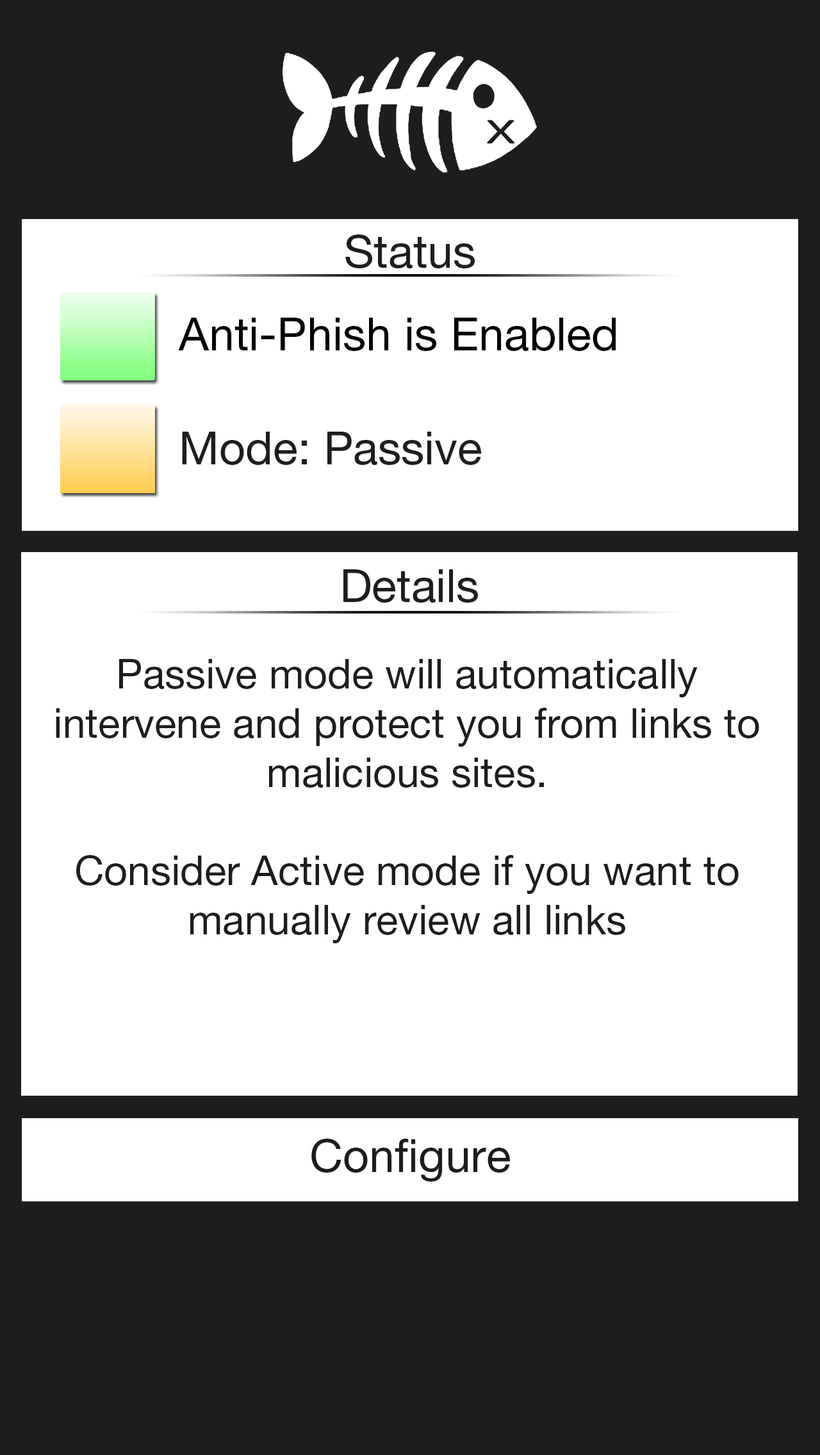
<style>
.page{position:relative;width:820px;height:1455px;background:#ffffff}
.page>*{position:absolute;margin:0}
.t1{font:46.1px "HelveticaNeueLTPro-Roman";color:#1d1d1d}
.t2{font:46.1px "HelveticaNeueLTPro-Roman";color:#000300}
.t3{font:41px "HelveticaNeueLTPro-Roman";color:#1d1d1d}
.t4{font:46.1px "HelveticaNeueLTPro-Roman";color:#1c1c1c}
</style>
<div class="page">
<p class="t1" style="left:345px;top:234px;width:129px;height:34px">Status</p>
<p class="t2" style="left:178px;top:318px;width:437px;height:33px">Anti-Phish is Enabled</p>
<p class="t1" style="left:182px;top:432px;width:299px;height:33px">Mode: Passive</p>
<p class="t1" style="left:343px;top:569px;width:135px;height:34px">Details</p>
<p class="t3" style="left:56px;top:659px;width:703px;height:284px;text-align:center">Passive mode will automatically intervene and protect you from links to malicious sites.<br><br>Consider Active mode if you want to manually review all links</p>
<p class="t4" style="left:311px;top:1139px;width:199px;height:42px">Configure</p>
</div>
